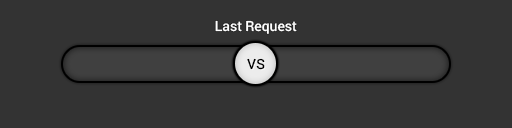
<style>
.page{position:relative;width:512px;height:128px;background:#333333}
.page>*{position:absolute;margin:0}
.t1{font:14px "Roboto-Medium";color:#ffffff}
.t2{font:14.1px "Roboto-Medium";color:#000000}
</style>
<div class="page">
<p class="t1" style="left:215px;top:20px;width:82px;height:14px">Last Request</p>
<p class="t2" style="left:247px;top:58px;width:18px;height:12px">VS</p>
</div>
